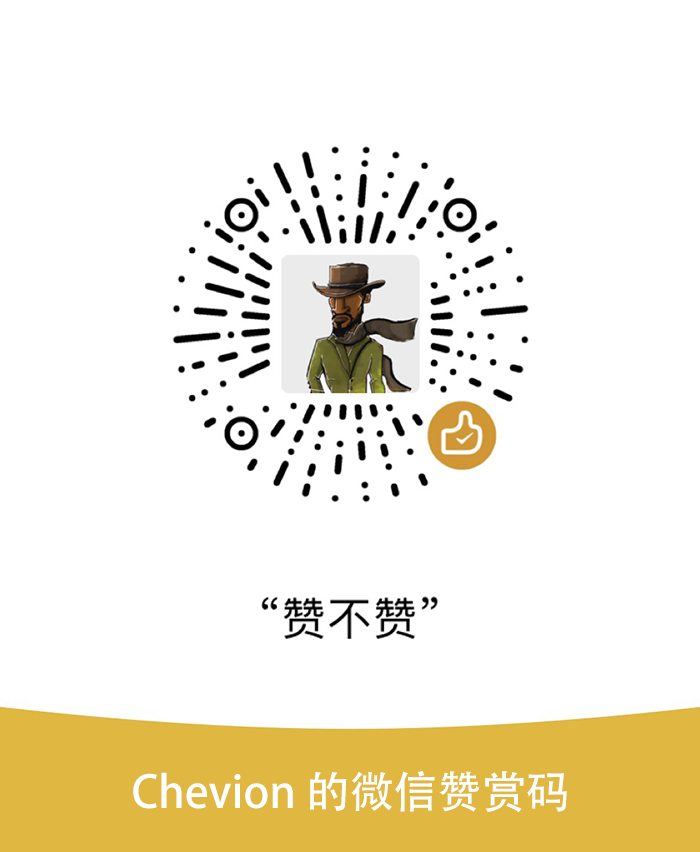
<style>
.page{position:relative;width:700px;height:852px;background:#ffffff}
.page>*{position:absolute;margin:0}
.t1{font:44px "AdobeHeitiStd-Regular";color:#ffffff}
</style>
<div class="page">
<p class="t1" style="left:133px;top:771px;width:434px;height:42px">Chevion 的微信赞赏码</p>
</div>
